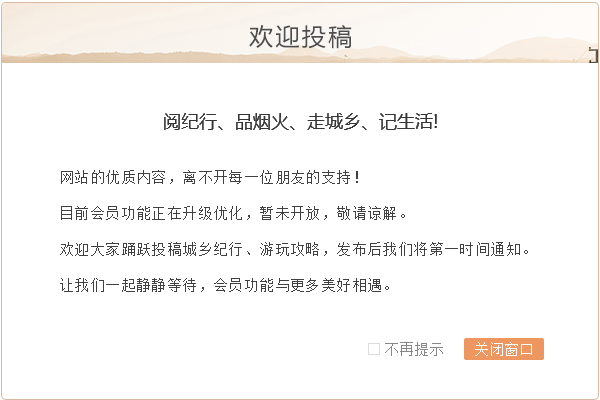
<style>
.page{position:relative;width:600px;height:400px;background:#ffffff}
.page>*{position:absolute;margin:0}
.t1{font:24px "MicrosoftYaHei";letter-spacing:0.1em;color:#4d4d4d}
.t2{font:18px "MicrosoftYaHei";color:#363636}
.t3{font:14px/36px "SimSun";letter-spacing:0.1em;color:#404040}
.t4{font:14px "SimSun";letter-spacing:0.075em;color:#888686}
.t5{font:14px "SimSun";letter-spacing:0.075em;color:#ffffff}
</style>
<div class="page">
<p class="t1" style="left:249px;top:25px;width:103px;height:24px">欢迎投稿</p>
<p class="t2" style="left:164px;top:113px;width:273px;height:17px">阅纪行、品烟火、走城乡、记生活!</p>
<p class="t3" style="left:60px;top:170px;width:468px;height:122px">网站的优质内容，离不开每一位朋友的支持！<br>目前会员功能正在升级优化，暂未开放，敬请谅解。<br>欢迎大家踊跃投稿城乡纪行、游玩攻略，发布后我们将第一时间通知。<br>让我们一起静静等待，会员功能与更多美好相遇。</p>
<p class="t4" style="left:385px;top:342px;width:147px;height:14px">不再提示　　<span class="t5">关闭窗口</span></p>
</div>
